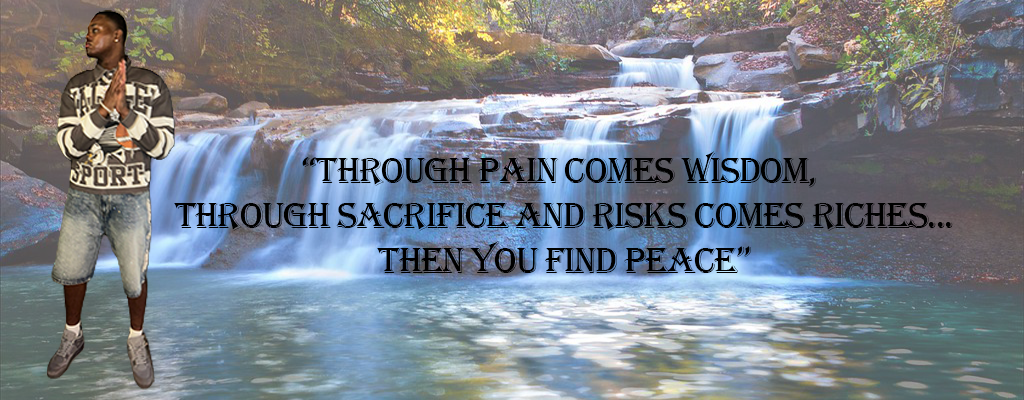
<style>
.page{position:relative;width:1024px;height:400px}
.page>*{position:absolute;margin:0}
.t1{font:37.5px "Algerian";letter-spacing:-0.04em;color:#000000}
</style>
<div class="page">
<p class="t1" style="left:174px;top:151px;width:779px;height:122px;text-align:center">“THROUGH pain comes wisdom, <br>through sacrifice and risks comes riches...<br>Then you find peace”</p>
</div>
